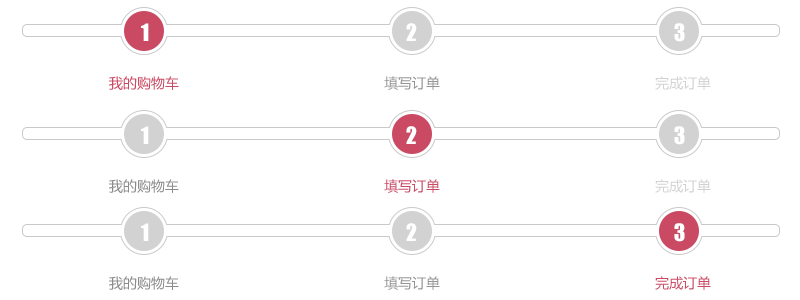
<style>
.page{position:relative;width:800px;height:300px;background:#ffffff}
.page>*{position:absolute;margin:0}
.t1{font:22px "Impact";color:#ffffff}
.t2{font:14px "MicrosoftYaHei";color:#ca4a63}
.t3{font:14px "MicrosoftYaHei";color:#949494}
.t4{font:14px "MicrosoftYaHei";color:#d2d2d2}
.t5{font:14px "MicrosoftYaHei";color:#8b8b8b}
</style>
<div class="page">
<p class="t1" style="left:141px;top:23px;width:8px;height:18px">1</p>
<p class="t1" style="left:406px;top:23px;width:11px;height:18px">2</p>
<p class="t1" style="left:674px;top:23px;width:11px;height:19px">3</p>
<p class="t2" style="left:109px;top:76px;width:70px;height:14px">我的购物车</p>
<p class="t3" style="left:384px;top:76px;width:56px;height:14px">填写订单</p>
<p class="t4" style="left:655px;top:76px;width:56px;height:14px">完成订单</p>
<p class="t1" style="left:141px;top:126px;width:8px;height:18px">1</p>
<p class="t1" style="left:406px;top:126px;width:11px;height:18px">2</p>
<p class="t1" style="left:674px;top:126px;width:11px;height:19px">3</p>
<p class="t5" style="left:109px;top:179px;width:70px;height:14px">我的购物车</p>
<p class="t2" style="left:384px;top:179px;width:56px;height:14px">填写订单</p>
<p class="t4" style="left:655px;top:179px;width:56px;height:14px">完成订单</p>
<p class="t1" style="left:141px;top:223px;width:8px;height:18px">1</p>
<p class="t1" style="left:406px;top:223px;width:11px;height:18px">2</p>
<p class="t1" style="left:674px;top:223px;width:11px;height:19px">3</p>
<p class="t5" style="left:109px;top:276px;width:70px;height:14px">我的购物车</p>
<p class="t3" style="left:384px;top:276px;width:56px;height:14px">填写订单</p>
<p class="t2" style="left:655px;top:276px;width:56px;height:14px">完成订单</p>
</div>
